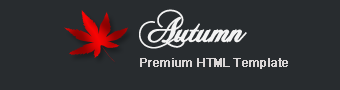
<style>
.page{position:relative;width:340px;height:90px;background:#282c2f}
.page>*{position:absolute;margin:0}
.t1{font:36px "ChopinScript";letter-spacing:-0.05em;color:#f3f3f3;font-weight:bold}
.t2{font:12px "ArialMT";letter-spacing:-0.05em;color:#dad6d6;font-weight:bold}
</style>
<div class="page">
<p class="t1" style="left:139px;top:9px;width:108px;height:40px">Autumn</p>
<p class="t2" style="left:140px;top:58px;width:148px;height:11px">Premium HTML Template</p>
</div>
